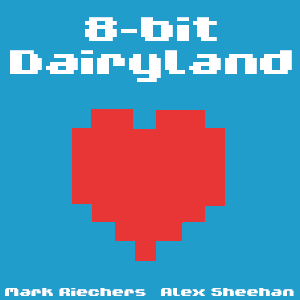
<style>
.page{position:relative;width:300px;height:300px;background:#209dcb}
.page>*{position:absolute;margin:0}
.t1{font:43.8px/33.4px "V5Xtender";color:#ffffff}
.t2{font:14.6px "V5Xtender";color:#ffffff}
</style>
<div class="page">
<p class="t1" style="left:10px;top:17px;width:282px;height:65px;text-align:center">8-bit<br>Dairyland</p>
<p class="t2" style="left:5px;top:288px;width:141px;height:8px">Mark Riechers</p>
<p class="t2" style="left:161px;top:288px;width:133px;height:8px">Alex Sheehan</p>
</div>
